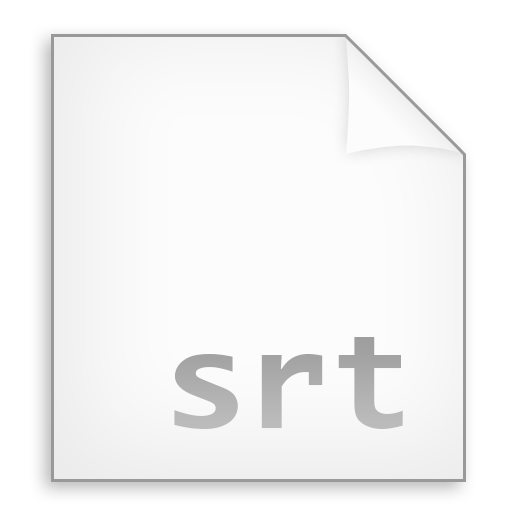
<style>
.page{position:relative;width:512px;height:512px;background:#ffffff}
.page>*{position:absolute;margin:0}
.t1{font:137.4px "LucidaSans-TypewriterBold";color:#9e9e9e}
</style>
<div class="page">
<p class="t1" style="left:174px;top:337px;width:229px;height:92px">srt</p>
</div>
